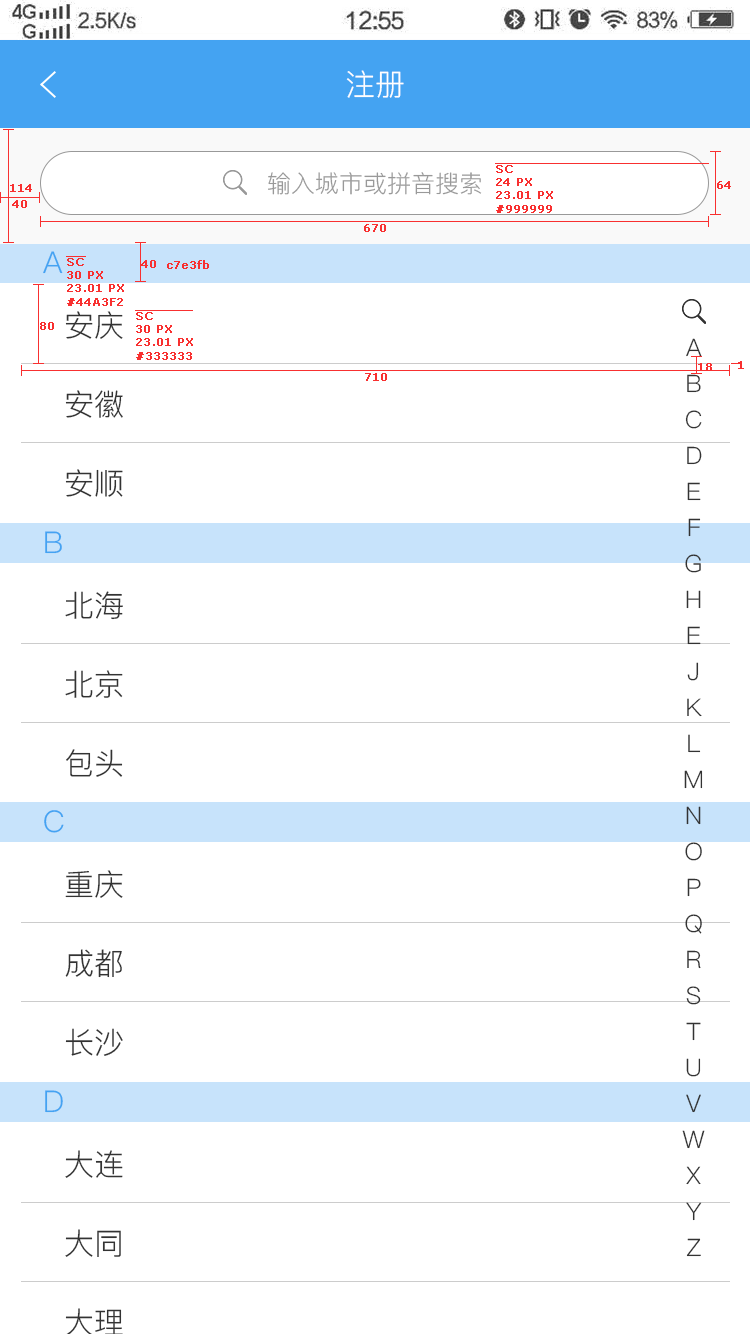
<style>
.page{position:relative;width:750px;height:1334px;background:#ffffff}
.page>*{position:absolute;margin:0}
.t1{font:30px "PingFang-SC-Regular";color:#ffffff;text-transform:uppercase}
.t2{font:24px "PingFang-SC-Regular";color:#999999;text-transform:uppercase}
.t3{font:11px "Verdana";color:#f83030;font-weight:bold}
.t4{font:30px "PingFang-SC-Regular";color:#44a3f2;text-transform:uppercase}
.t5{font:30px "PingFang-SC-Regular";color:#333333;text-transform:uppercase}
.t6{font:24px/36px "PingFang-SC-Regular";color:#333333;text-transform:uppercase}
</style>
<div class="page">
<p class="t1" style="left:346px;top:70px;width:58px;height:28px">注册</p>
<p class="t2" style="left:268px;top:172px;width:214px;height:23px">输入城市或拼音搜索</p>
<p class="t3" style="left:496px;top:165px;width:57px;height:48px">SC<br>24 PX<br>23.01 PX<br>#999999</p>
<p class="t3" style="left:10px;top:184px;width:22px;height:8px">114</p>
<p class="t3" style="left:717px;top:181px;width:14px;height:8px">64</p>
<p class="t3" style="left:12px;top:200px;width:15px;height:8px">40</p>
<p class="t3" style="left:364px;top:224px;width:22px;height:8px">670</p>
<p class="t4" style="left:43px;top:251px;width:20px;height:23px">A</p>
<p class="t3" style="left:67px;top:258px;width:57px;height:48px">SC<br>30 PX<br>23.01 PX<br>#44A3F2</p>
<p class="t3" style="left:141px;top:260px;width:15px;height:8px">40</p>
<p class="t3" style="left:167px;top:260px;width:42px;height:9px">c7e3fb</p>
<p class="t5" style="left:65px;top:311px;width:58px;height:28px">安庆</p>
<p class="t3" style="left:136px;top:312px;width:57px;height:48px">SC<br>30 PX<br>23.01 PX<br>#333333</p>
<p class="t3" style="left:40px;top:322px;width:14px;height:8px">80</p>
<p class="t6" style="left:682px;top:338px;width:23px;height:919px;text-align:center">A<br>B<br>C<br>D<br>E<br>F<br>G<br>H<br>E<br>J<br>K<br>L<br>M<br>N<br>O<br>P<br>Q<br>R<br>S<br>T<br>U<br>V<br>W<br>X<br>Y<br>Z</p>
<p class="t3" style="left:698px;top:363px;width:14px;height:8px">18</p>
<p class="t3" style="left:738px;top:361px;width:6px;height:8px">1</p>
<p class="t3" style="left:365px;top:373px;width:22px;height:8px">710</p>
<p class="t5" style="left:65px;top:390px;width:58px;height:28px">安徽</p>
<p class="t5" style="left:65px;top:469px;width:58px;height:28px">安顺</p>
<p class="t4" style="left:45px;top:531px;width:17px;height:23px">B</p>
<p class="t5" style="left:65px;top:591px;width:58px;height:29px">北海</p>
<p class="t5" style="left:65px;top:670px;width:58px;height:28px">北京</p>
<p class="t5" style="left:66px;top:749px;width:57px;height:28px">包头</p>
<p class="t4" style="left:44px;top:810px;width:20px;height:23px">C</p>
<p class="t5" style="left:65px;top:870px;width:58px;height:28px">重庆</p>
<p class="t5" style="left:65px;top:949px;width:57px;height:29px">成都</p>
<p class="t5" style="left:65px;top:1028px;width:58px;height:28px">长沙</p>
<p class="t4" style="left:45px;top:1090px;width:18px;height:23px">D</p>
<p class="t5" style="left:65px;top:1150px;width:58px;height:28px">大连</p>
<p class="t5" style="left:65px;top:1229px;width:56px;height:28px">大同</p>
<p class="t5" style="left:65px;top:1308px;width:58px;height:28px">大理</p>
</div>
